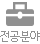
<style>
.page{position:relative;width:40px;height:44px;background:#ffffff}
.page>*{position:absolute;margin:0}
.t1{font:10.7px "NanumBarunGothic";color:#909090}
</style>
<div class="page">
<p class="t1" style="left:0px;top:31px;width:40px;height:11px">전공분야</p>
</div>
